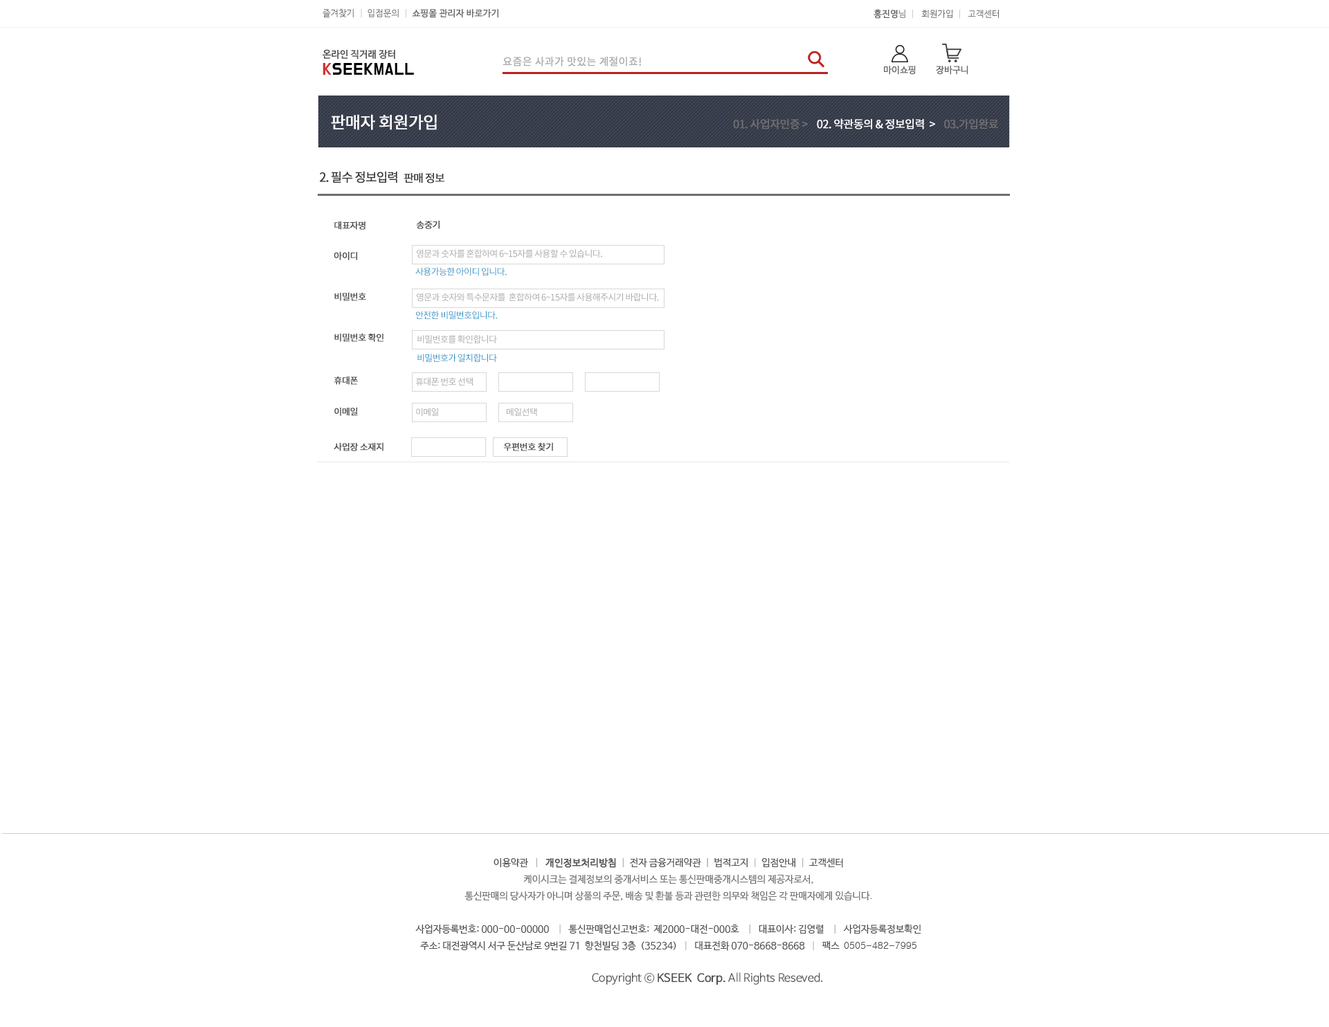
<style>
.page{position:relative;width:1329px;height:1027px;background:#ffffff}
.page>*{position:absolute;margin:0}
.t1{font:9px "NanumBarunGothic";color:#686868;font-weight:bold}
.t2{font:9px "NanumBarunGothic";color:#686868}
.t3{font:9px "NanumBarunGothic";color:#cccccc}
.t4{font:9px "NanumBarunGothic";color:#696868}
.t5{font:9px "NanumBarunGothic";color:#696868;font-weight:bold}
.t6{font:10.4px "NotoSansCJKkr-Regular";color:#aaaaaa;font-weight:bold}
.t7{font:9px "NanumBarunGothic";color:#6a6a6a;font-weight:bold}
.t8{font:16.6px "NotoSansCJKkr-Regular";letter-spacing:-0.05em;color:#ffffff;font-weight:bold}
.t9{font:11.1px "NotoSansCJKkr-Regular";letter-spacing:-0.05em;color:#ffffff;font-weight:bold}
.t10{font:11.1px "NotoSansCJKkr-Regular";letter-spacing:-0.05em;color:#717171;font-weight:bold}
.t11{font:12.5px "NotoSansCJKkr-Regular";letter-spacing:-0.075em;color:#373737;font-weight:bold}
.t12{font:11.1px "NotoSansCJKkr-Regular";letter-spacing:-0.075em;color:#373737;font-weight:bold}
.t13{font:9px "NotoSansCJKkr-Regular";letter-spacing:-0.05em;color:#484848;font-weight:bold}
.t14{font:9px "NotoSansCJKkr-Regular";letter-spacing:-0.05em;color:#494949;font-weight:bold}
.t15{font:9px "NotoSansCJKkr-Regular";letter-spacing:-0.05em;color:#a7a7a7}
.t16{font:9px "NotoSansCJKkr-Regular";letter-spacing:-0.05em;color:#2391c4}
.t17{font:9.7px/16.6px "NanumBarunGothic";color:#727272}
.t18{font:9.7px/20.8px "NanumBarunGothic";color:#515151}
.t19{font:9.7px/16.6px "NanumBarunGothic";color:#515151}
.t20{font:9.7px/16.6px "NanumBarunGothic";color:#b3b3b3}
.t21{font:9.7px/16.6px "NanumBarunGothic";color:#515151;font-weight:bold}
.t22{font:9.7px/16.6px "NanumBarunGothic";color:#949494}
.t23{font:9.7px/16.6px "Gulim";color:#515151}
.t24{font:11.1px "NanumBarunGothicOTFLight";color:#515151}
.t25{font:11.1px "NanumBarunGothicOTFLight";color:#515151;font-weight:bold}
</style>
<div class="page">
<p class="t1" style="left:323px;top:9px;width:175px;height:9px"><span class="t2">즐겨찾기  </span><span class="t3">| </span><span class="t2"> 입점문의  </span><span class="t3">|  </span>쇼핑몰 관리자 바로가기</p>
<p class="t4" style="left:874px;top:9px;width:125px;height:10px"><span class="t5">홍진영</span>님  <span class="t3">|   </span>회원가입  <span class="t3">|   </span>고객센터</p>
<p class="t6" style="left:503px;top:56px;width:138px;height:10px">요즘은 사과가 맛있는 계절이죠!</p>
<p class="t7" style="left:884px;top:66px;width:32px;height:9px">마이쇼핑</p>
<p class="t7" style="left:936px;top:66px;width:33px;height:9px">장바구니</p>
<p class="t8" style="left:331px;top:114px;width:106px;height:16px">판매자 회원가입</p>
<p class="t9" style="left:733px;top:118px;width:265px;height:11px"><span class="t10">01. 사업자인증 &gt;    </span>02. 약관동의 &amp; 정보입력  &gt;  <span class="t10">  03.가입완료</span></p>
<p class="t11" style="left:320px;top:171px;width:77px;height:12px">2. 필수 정보입력</p>
<p class="t12" style="left:404px;top:172px;width:40px;height:11px">판매 정보</p>
<p class="t13" style="left:334px;top:221px;width:32px;height:9px">대표자명</p>
<p class="t14" style="left:416px;top:220px;width:24px;height:9px">송중기</p>
<p class="t13" style="left:334px;top:251px;width:23px;height:9px">아이디</p>
<p class="t15" style="left:417px;top:249px;width:185px;height:9px">영문과 숫자를 혼합하여 6~15자를 사용할 수 있습니다.</p>
<p class="t16" style="left:415px;top:267px;width:92px;height:9px">사용가능한 아이디 입니다.</p>
<p class="t13" style="left:334px;top:292px;width:32px;height:9px">비밀번호</p>
<p class="t15" style="left:417px;top:293px;width:242px;height:9px">영문과 숫자와 특수문자를  혼합하여 6~15자를 사용해주시기 바랍니다.</p>
<p class="t16" style="left:416px;top:311px;width:81px;height:9px">안전한 비밀번호입니다.</p>
<p class="t13" style="left:334px;top:333px;width:50px;height:9px">비밀번호 확인</p>
<p class="t15" style="left:417px;top:335px;width:80px;height:8px">비밀번호를 확인합니다</p>
<p class="t16" style="left:417px;top:354px;width:80px;height:8px">비밀번호가 일치합니다</p>
<p class="t13" style="left:334px;top:376px;width:24px;height:9px">휴대폰</p>
<p class="t15" style="left:415px;top:377px;width:58px;height:9px">휴대폰 번호 선택</p>
<p class="t13" style="left:334px;top:407px;width:24px;height:9px">이메일</p>
<p class="t15" style="left:416px;top:408px;width:23px;height:9px">이메일</p>
<p class="t15" style="left:507px;top:408px;width:30px;height:8px">메일선택</p>
<p class="t13" style="left:334px;top:442px;width:50px;height:9px">사업장 소재지</p>
<p class="t13" style="left:503px;top:442px;width:50px;height:9px">우편번호 찾기</p>
<p class="t17" style="left:415px;top:858px;width:506px;height:93px;text-align:center"><span class="t18">이</span><span class="t19">용약관  </span><span class="t20"> |   </span><span class="t21">개인정보처리방침</span><span class="t20">  |  </span><span class="t19">전자 금융거래약관</span><span class="t22">  |  </span><span class="t19">법적고지</span><span class="t20">  | </span><span class="t19"> 입점안내 </span><span class="t20"> |  </span><span class="t19">고객센터<br></span>케이시크는 결제정보의 중개서비스 또는 통신판매중개시스템의 제공자로서, <br>통신판매의 당사자가 아니며 상품의 주문, 배송 및 환불 등과 관련한 의무와 책임은 각 판매자에게 있습니다.<br><span class="t19"><br>사업자등록번호: 000-00-00000   </span><span class="t20"> | </span><span class="t19">  통신판매업신고번호:  제2000-대전-000호  </span><span class="t20">  |   </span><span class="t19">대표이사: 김영렬 </span><span class="t20">   |   </span><span class="t19">사업자등록정보확인<br>주소: 대전광역시 서구 둔산남로 9번길 71  향천빌딩 3층  (35234)</span><span class="t20">   |  </span><span class="t19"> 대표전화 070-8668-8668 </span><span class="t20">  |  </span><span class="t19"> 팩스  </span><span class="t23">0505-482-7995</span></p>
<p class="t24" style="left:592px;top:973px;width:231px;height:12px">Copyright ⓒ <span class="t25">KSEEK  Corp.</span> All Rights Reseved.</p>
</div>
